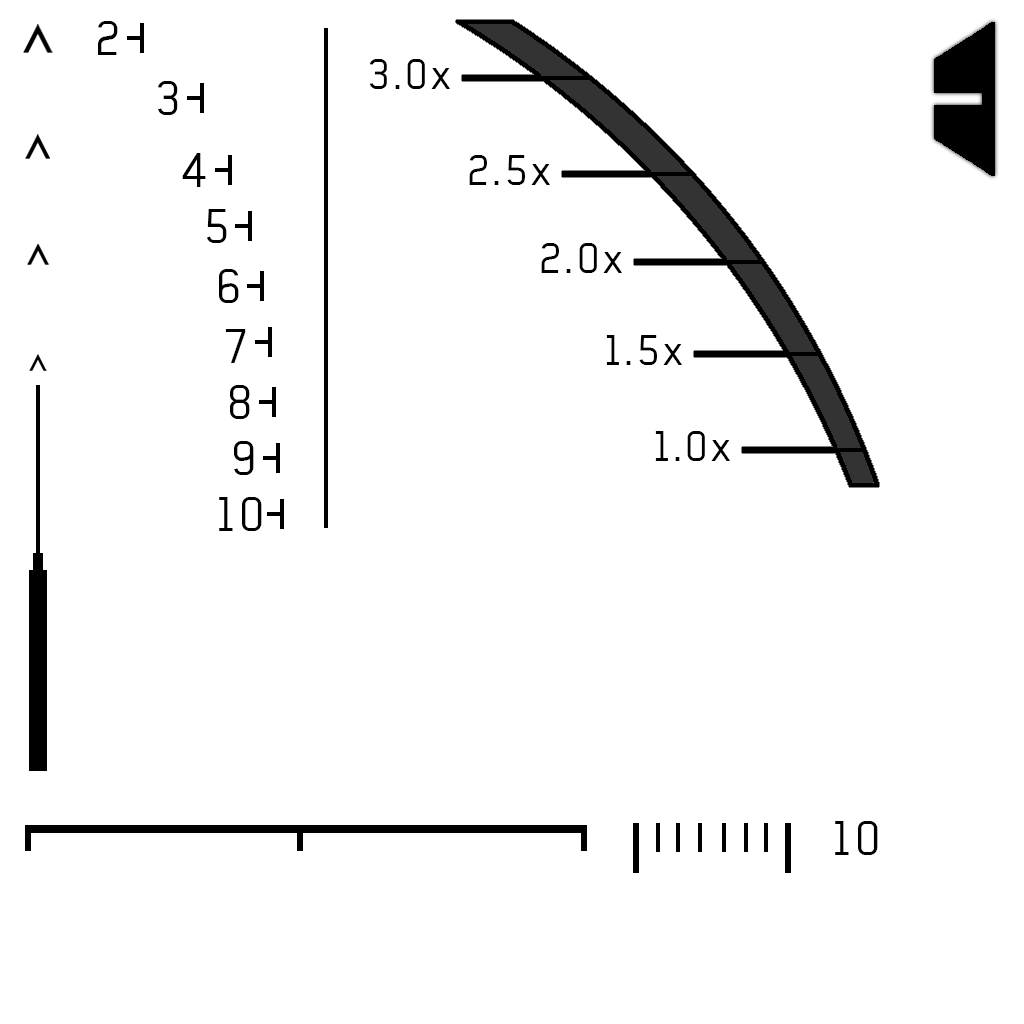
<style>
.page{position:relative;width:1024px;height:1024px;background:#ffffff}
.page>*{position:absolute;margin:0}
.t1{font:47px "Baksheesh";letter-spacing:0.08em;color:#000000}
.t2{font:42px "Baksheesh";letter-spacing:0.08em;color:#000000}
</style>
<div class="page">
<p class="t1" style="left:98px;top:21px;width:20px;height:34px">2</p>
<p class="t2" style="left:369px;top:59px;width:81px;height:30px">3.0x</p>
<p class="t1" style="left:158px;top:81px;width:20px;height:34px">3</p>
<p class="t1" style="left:182px;top:153px;width:24px;height:34px">4</p>
<p class="t2" style="left:469px;top:155px;width:81px;height:30px">2.5x</p>
<p class="t1" style="left:206px;top:209px;width:21px;height:34px">5</p>
<p class="t2" style="left:541px;top:243px;width:81px;height:30px">2.0x</p>
<p class="t1" style="left:219px;top:269px;width:20px;height:34px">6</p>
<p class="t1" style="left:225px;top:329px;width:21px;height:34px">7</p>
<p class="t2" style="left:606px;top:335px;width:76px;height:30px">1.5x</p>
<p class="t1" style="left:230px;top:385px;width:20px;height:34px">8</p>
<p class="t2" style="left:655px;top:431px;width:75px;height:30px">1.0x</p>
<p class="t1" style="left:234px;top:441px;width:20px;height:34px">9</p>
<p class="t1" style="left:219px;top:497px;width:43px;height:34px">10</p>
<p class="t1" style="left:835px;top:821px;width:43px;height:34px">10</p>
</div>
